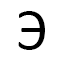
<style>
.page{position:relative;width:64px;height:64px;background:#ffffff}
.page>*{position:absolute;margin:0}
.t1{font:58.3px "Calibri";color:#000000}
</style>
<div class="page">
<p class="t1" style="left:18px;top:11px;width:27px;height:39px">Э</p>
</div>
